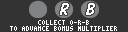
<style>
.page{position:relative;width:128px;height:32px;background:#333333}
.page>*{position:absolute;margin:0}
.t1{font:18px "DomDiagonalBT-Regular";letter-spacing:0.075em;color:#ffffff}
.t2{font:6px "Terminal";color:#ffffff}
</style>
<div class="page">
<p class="t1" style="left:60px;top:3px;width:9px;height:12px">R</p>
<p class="t1" style="left:86px;top:3px;width:9px;height:12px">B</p>
<p class="t2" style="left:10px;top:26px;width:107px;height:5px">TO ADVANCE BONUS MULTIPLIER</p>
<p class="t2" style="left:38px;top:20px;width:51px;height:5px">COLLECT O-R-B</p>
</div>
